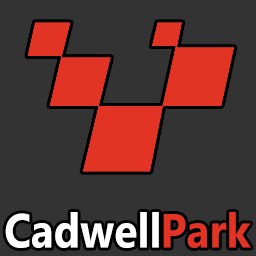
<style>
.page{position:relative;width:256px;height:256px;background:#333333}
.page>*{position:absolute;margin:0}
.t1{font:48px "Gadugi-Bold";color:#ffffff;scale:0.89 1}
.t2{font:48px "Gadugi-Bold";color:#e23424;scale:0.89 1}
</style>
<div class="page">
<p class="t1" style="left:5px;top:212px;width:154px;height:36px">Cadwell</p>
<p class="t2" style="left:163px;top:212px;width:88px;height:36px">Park</p>
</div>
